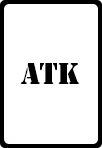
<style>
.page{position:relative;width:102px;height:148px;background:#ffffff}
.page>*{position:absolute;margin:0}
.t1{font:27.5px "StencilStd";color:#000000}
</style>
<div class="page">
<p class="t1" style="left:20px;top:63px;width:59px;height:21px">ATK</p>
</div>
